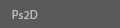
<style>
.page{position:relative;width:120px;height:28px;background:#5a5a5a}
.page>*{position:absolute;margin:0}
.t1{font:12px "MyriadPro-Regular";letter-spacing:0.025em;color:#bfbfbf}
</style>
<div class="page">
<p class="t1" style="left:12px;top:10px;width:26px;height:9px">Ps2D</p>
</div>
